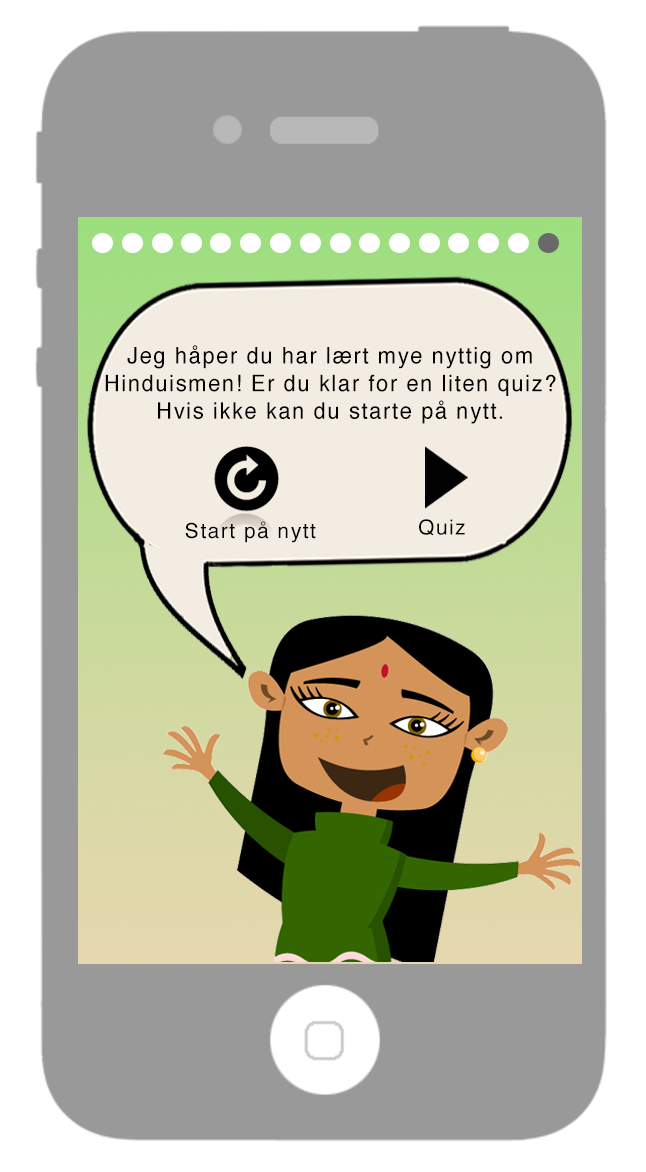
<style>
.page{position:relative;width:646px;height:1172px;background:#999999}
.page>*{position:absolute;margin:0}
.t1{font:11px "Helvetica";letter-spacing:0.075em;color:#010101;scale:0.95 1}
.t2{font:20.9px "Helvetica";letter-spacing:0.075em;color:#000000}
.t3{font:20.8px "Helvetica";letter-spacing:0.075em;color:#000000}
</style>
<div class="page">
<p class="t1" style="left:105px;top:345px;width:451px;height:79px;text-align:center">Jeg håper du har lært mye nyttig om<br>Hinduismen! Er du klar for en liten quiz?<br>Hvis ikke kan du starte på nytt.</p>
<p class="t2" style="left:185px;top:521px;width:131px;height:22px">Start på nytt</p>
<p class="t3" style="left:419px;top:519px;width:46px;height:17px">Quiz</p>
</div>
